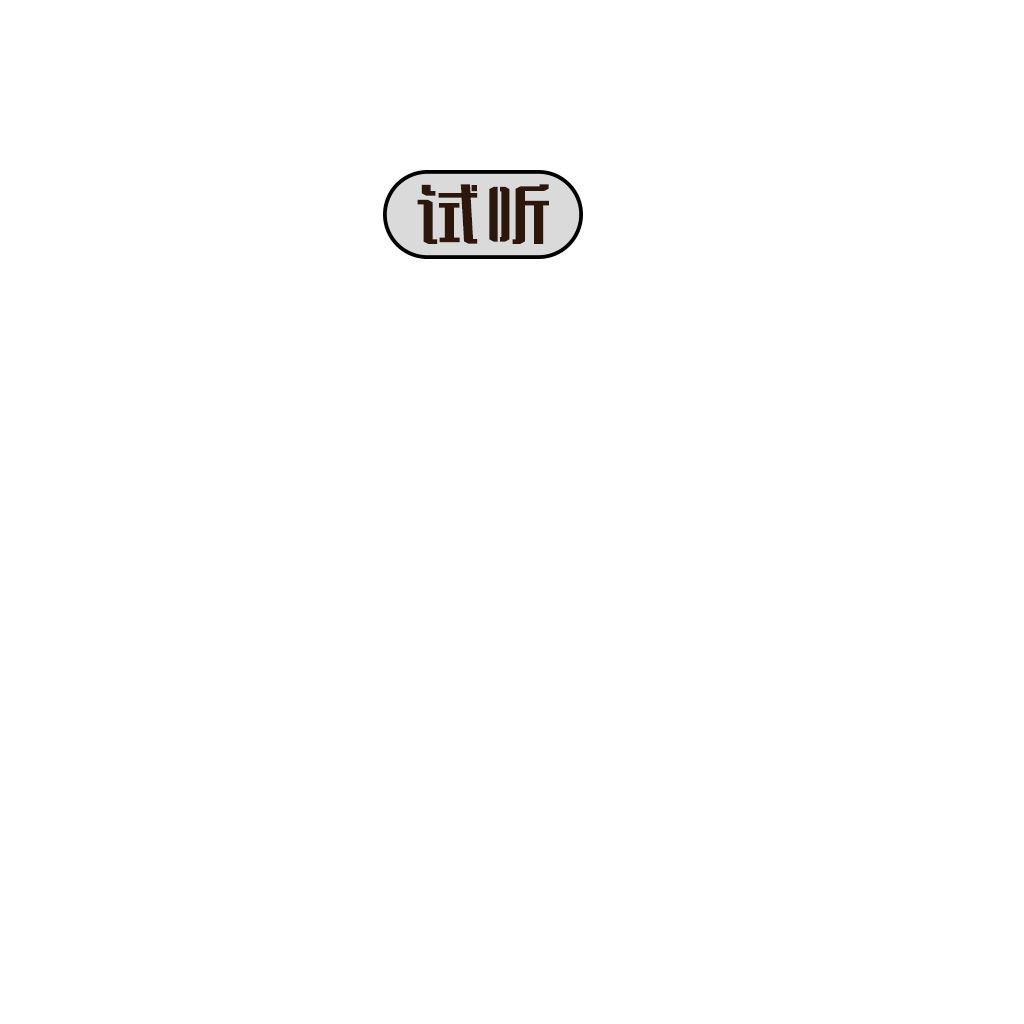
<style>
.page{position:relative;width:1024px;height:1024px;background:#ffffff}
.page>*{position:absolute;margin:0}
.t1{font:72px "sucaijishikufangti";color:#2d160a}
</style>
<div class="page">
<p class="t1" style="left:417px;top:184px;width:132px;height:60px">试听</p>
</div>
